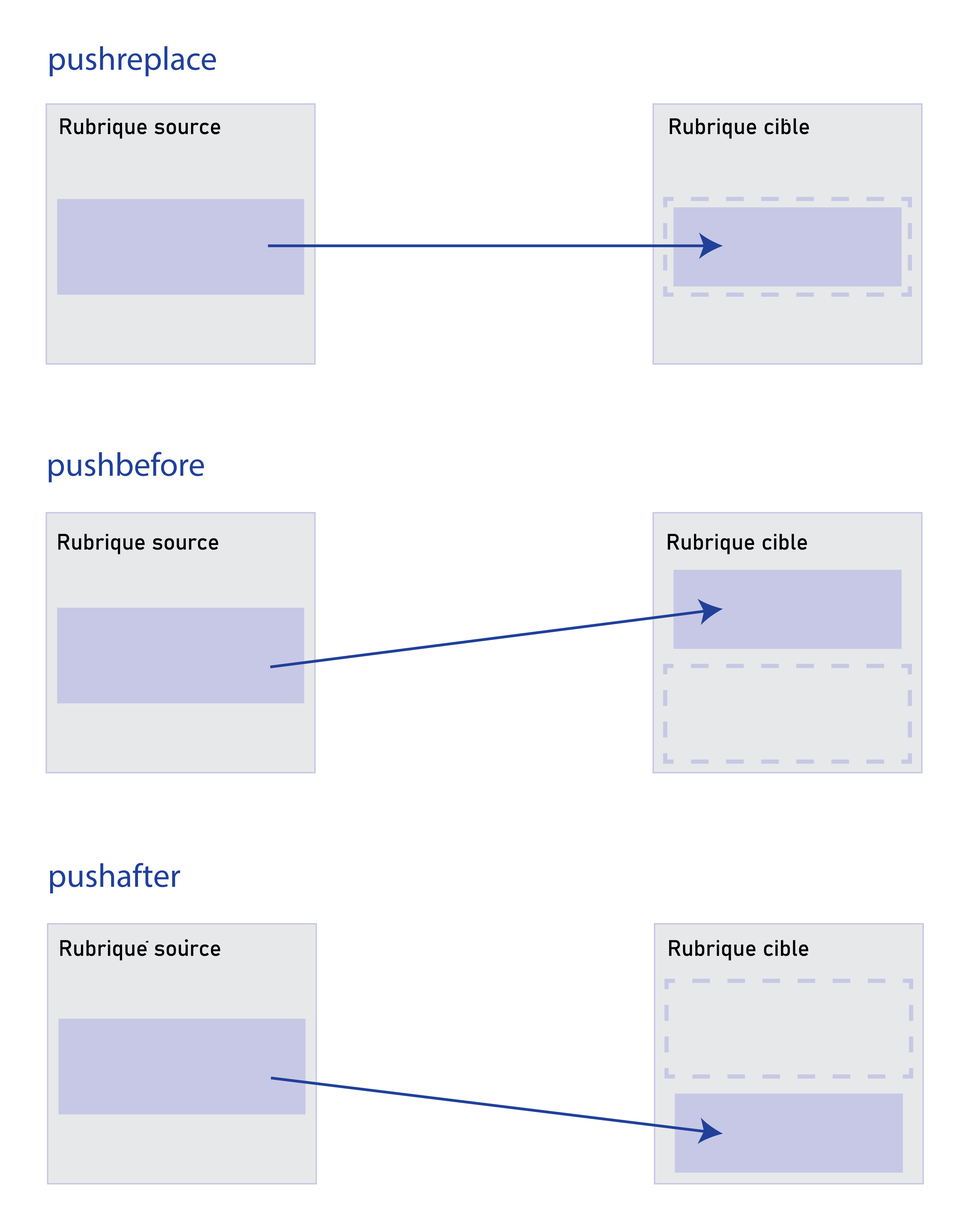
<style>
.page{position:relative;width:971px;height:1228px;background:#ffffff}
.page>*{position:absolute;margin:0}
.t1{font:22.1px "Bahnschrift";color:#000000}
</style>
<div class="page">
<p class="t1" style="left:60px;top:118px;width:160px;height:21px">Rubrique source</p>
<p class="t1" style="left:670px;top:118px;width:139px;height:21px">Rubrique cible</p>
<p class="t1" style="left:58px;top:534px;width:160px;height:20px">Rubrique source</p>
<p class="t1" style="left:668px;top:534px;width:139px;height:20px">Rubrique cible</p>
<p class="t1" style="left:60px;top:940px;width:160px;height:20px">Rubrique source</p>
<p class="t1" style="left:669px;top:940px;width:140px;height:20px">Rubrique cible</p>
</div>
